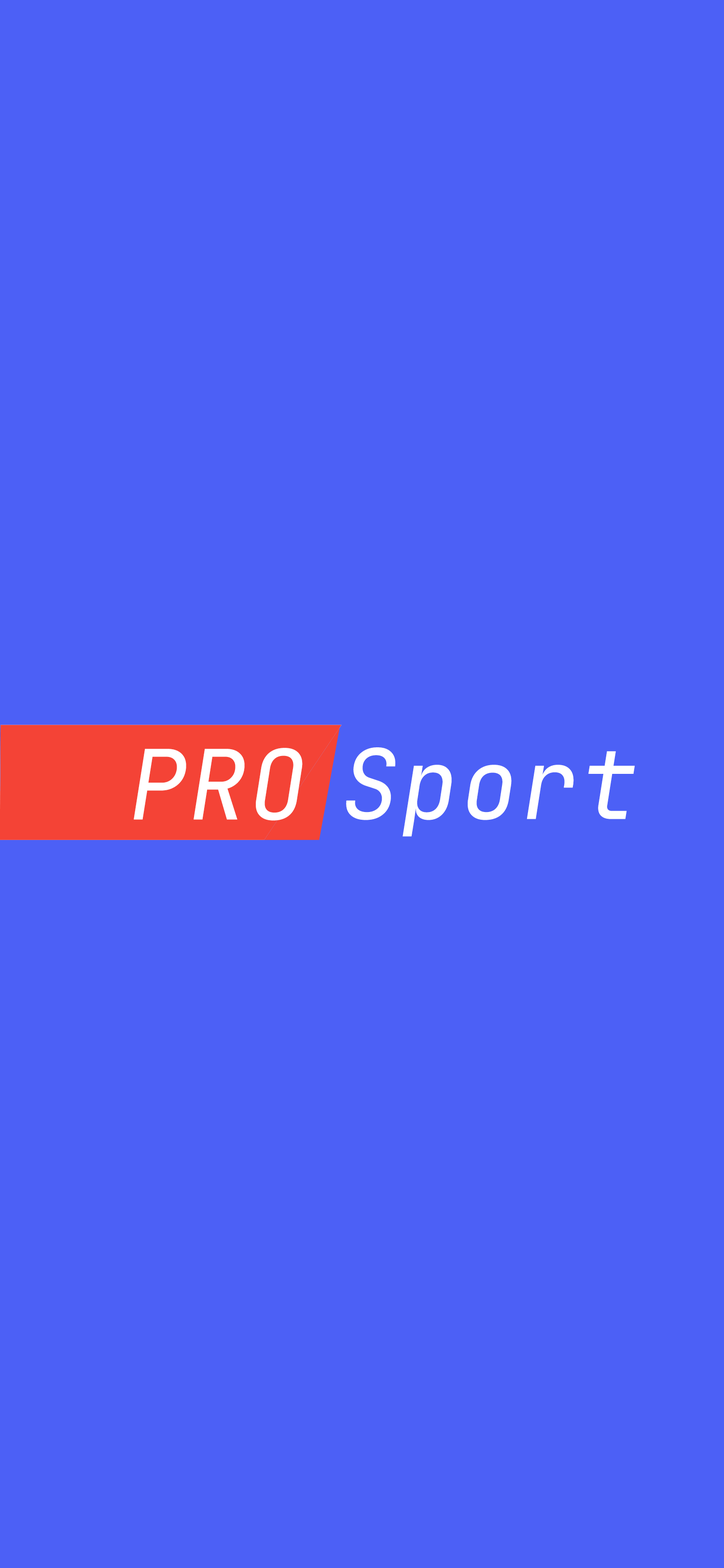
<style>
.page{position:relative;width:724px;height:1568px;background:#4c60f6}
.page>*{position:absolute;margin:0}
.t1{font:96.6px "JetBrainsMono-Italic";letter-spacing:0.02em;color:#ffffff}
</style>
<div class="page">
<p class="t1" style="left:134px;top:748px;width:169px;height:73px">PRO</p>
<p class="t1" style="left:346px;top:747px;width:289px;height:90px">Sport</p>
</div>
